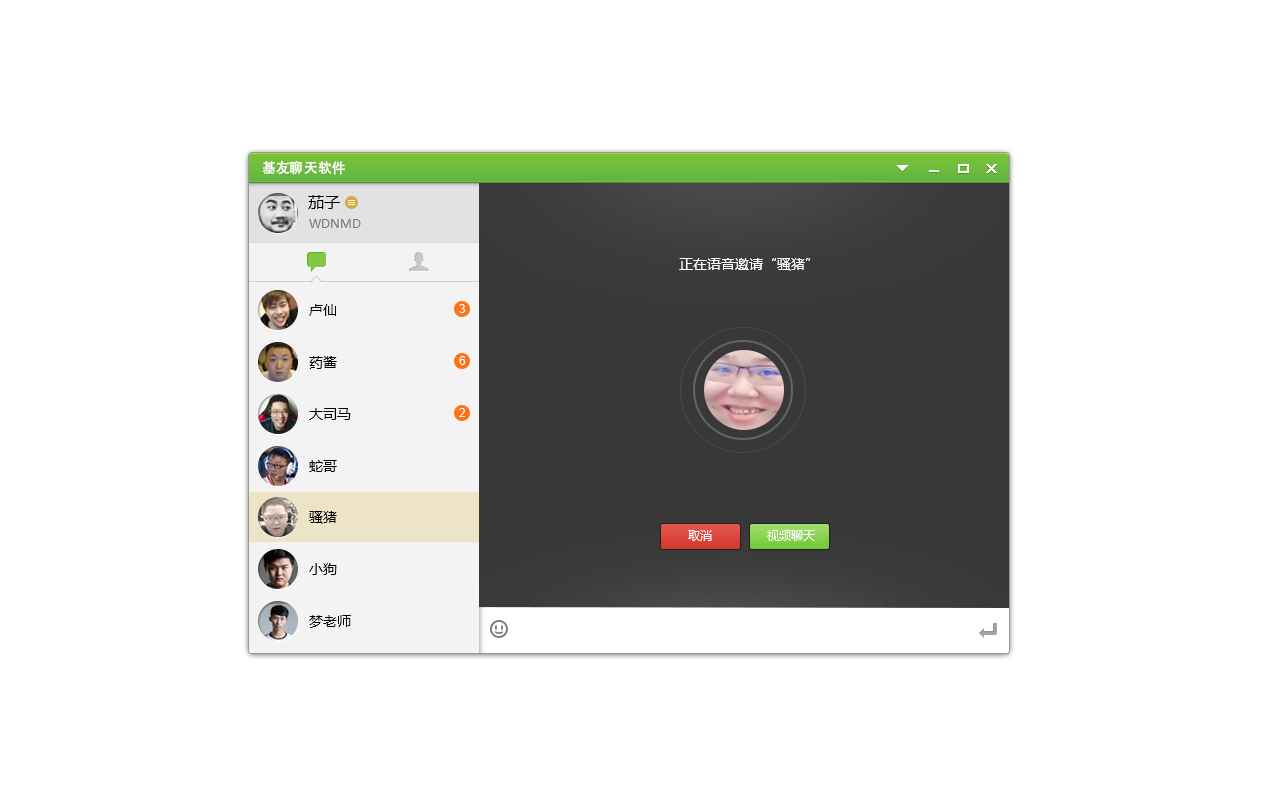
<style>
.page{position:relative;width:1280px;height:800px;background:#ffffff}
.page>*{position:absolute;margin:0}
.t1{font:14px "AdobeHeitiStd-Regular";color:#ffffff}
.t2{font:16px "MicrosoftYaHei";color:#000000}
.t3{font:12px "MicrosoftYaHei";color:#767676}
.t4{font:14px "MicrosoftYaHei";color:#ffffff}
.t5{font:14px "MicrosoftYaHei";color:#000000}
.t6{font:12px "ArialMT";color:#ffffff}
.t7{font:12px "MicrosoftYaHei";color:#ffffff}
</style>
<div class="page">
<p class="t1" style="left:262px;top:160px;width:83px;height:15px">基友聊天软件</p>
<p class="t2" style="left:308px;top:195px;width:32px;height:14px">茄子</p>
<p class="t3" style="left:309px;top:219px;width:52px;height:9px">WDNMD</p>
<p class="t4" style="left:679px;top:258px;width:131px;height:13px">正在语音邀请“骚猪”</p>
<p class="t5" style="left:309px;top:304px;width:27px;height:12px">卢仙</p>
<p class="t6" style="left:459px;top:304px;width:7px;height:9px">3</p>
<p class="t5" style="left:309px;top:356px;width:28px;height:13px">药酱</p>
<p class="t6" style="left:459px;top:356px;width:7px;height:9px">6</p>
<p class="t5" style="left:309px;top:408px;width:42px;height:12px">大司马</p>
<p class="t6" style="left:459px;top:408px;width:6px;height:9px">2</p>
<p class="t5" style="left:309px;top:460px;width:28px;height:12px">蛇哥</p>
<p class="t5" style="left:309px;top:511px;width:28px;height:13px">骚猪</p>
<p class="t7" style="left:688px;top:530px;width:24px;height:11px">取消</p>
<p class="t7" style="left:767px;top:530px;width:48px;height:11px">视频聊天</p>
<p class="t5" style="left:309px;top:563px;width:28px;height:12px">小狗</p>
<p class="t5" style="left:309px;top:615px;width:42px;height:13px">梦老师</p>
</div>
